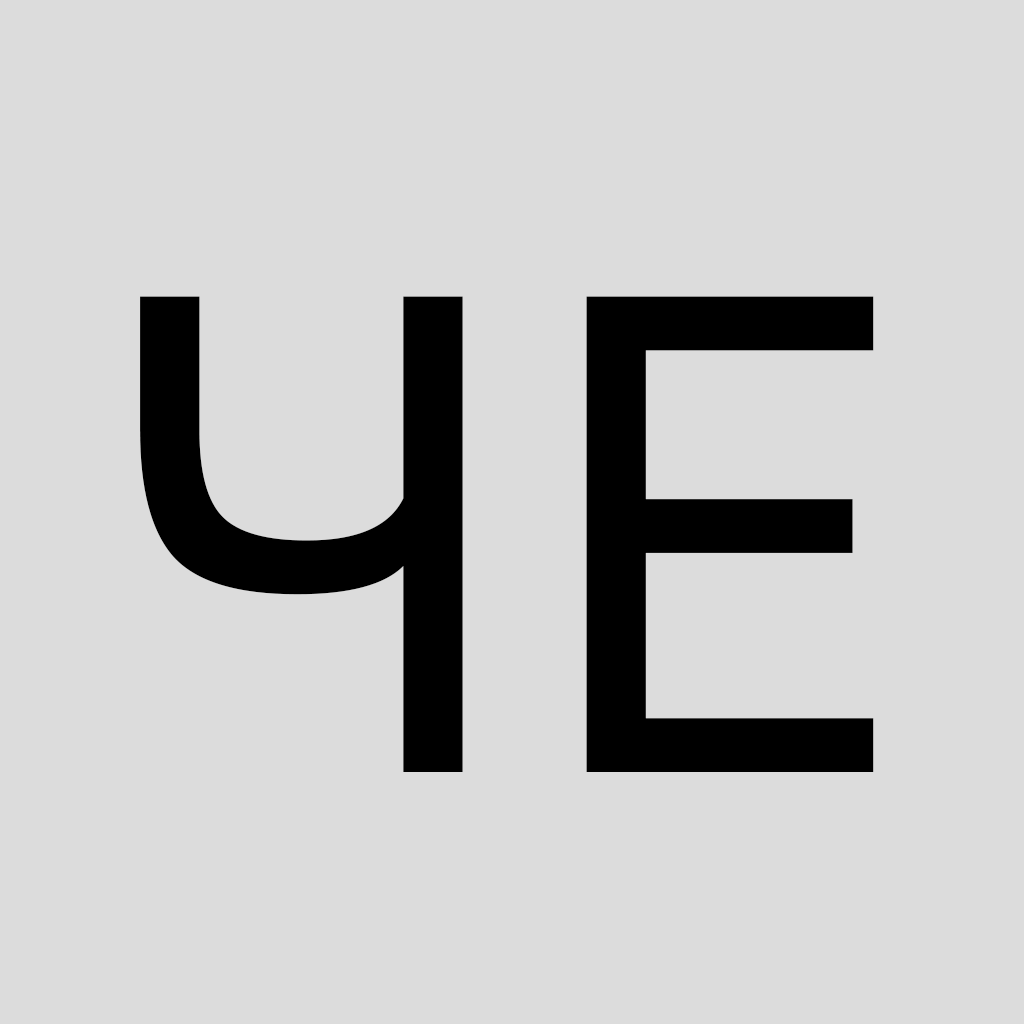
<style>
.page{position:relative;width:1024px;height:1024px;background:#dcdcdc}
.page>*{position:absolute;margin:0}
.t1{font:688.7px "DIN2014-Regular";letter-spacing:0.01em;color:#000000}
</style>
<div class="page">
<p class="t1" style="left:140px;top:296px;width:734px;height:476px">ЧЕ</p>
</div>
